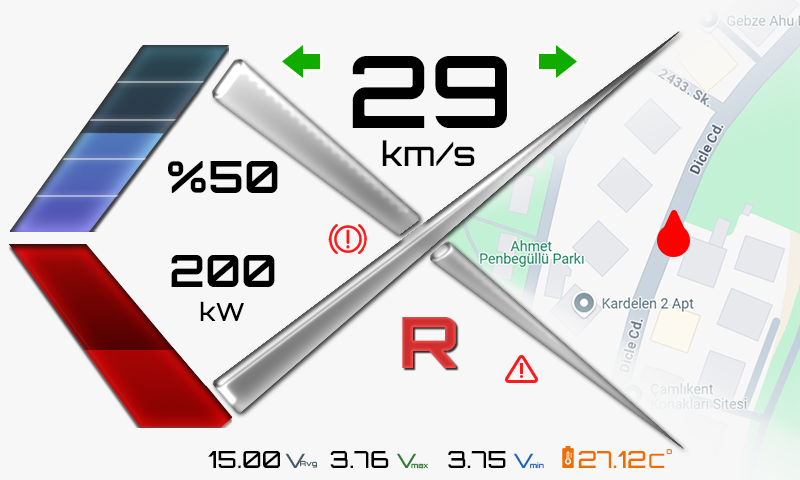
<style>
.page{position:relative;width:800px;height:480px;background:#f7f7f7}
.page>*{position:absolute;margin:0}
.t1{font:100px "Orbitron-SemiBold";color:#000000}
.t2{font:33.3px "Orbitron-Medium";color:#000000}
.t3{font:44.6px "Orbitron-Bold";color:#000000}
.t4{font:25px "Orbitron-Medium";color:#000000}
.t5{font:70.9px "Orbitron-ExtraBold";color:#d32f2f;scale:1.05 1}
.t6{font:8px "Orbitron-Medium";scale:1.05 1}
.t7{font:23.6px "Orbitron-Medium";color:#000000}
.t8{font:19.8px "Orbitron-Medium";color:#455a64;scale:1.05 1}
.t9{font:7.1px "Orbitron-Medium";color:#455a64;scale:1.05 1}
.t10{font:19.8px "Orbitron-Medium";color:#2e7d32;scale:1.05 1}
.t11{font:19.8px "Orbitron-Medium";color:#1565c0;scale:1.05 1}
.t12{font:7.1px "Orbitron-Medium";scale:1.05 1}
.t13{font:23.6px "Orbitron-Medium";color:#ef6c00}
.t14{font:19.8px "Orbitron-Medium";color:#ef6c00;scale:1.05 1}
.t15{font:7.1px "Orbitron-Medium";color:#2e7d32;scale:1.05 1}
</style>
<div class="page">
<p class="t1" style="left:352px;top:56px;width:155px;height:72px">29</p>
<p class="t2" style="left:382px;top:140px;width:93px;height:26px">km/s</p>
<p class="t3" style="left:168px;top:161px;width:110px;height:32px">%50</p>
<p class="t3" style="left:171px;top:255px;width:104px;height:32px">200</p>
<p class="t4" style="left:200px;top:301px;width:44px;height:20px">kW</p>
<p class="t5" style="left:402px;top:317px;width:54px;height:51px">R</p>
<p class="t6" style="left:666px;top:449px;width:6px;height:6px">o</p>
<p class="t7" style="left:208px;top:451px;width:72px;height:17px">15.00</p>
<p class="t8" style="left:285px;top:453px;width:20px;height:15px">V</p>
<p class="t9" style="left:300px;top:460px;width:17px;height:8px">Avg</p>
<p class="t7" style="left:330px;top:451px;width:59px;height:17px">3.76</p>
<p class="t10" style="left:396px;top:453px;width:21px;height:15px">V</p>
<p class="t7" style="left:448px;top:451px;width:58px;height:17px">3.75</p>
<p class="t11" style="left:513px;top:453px;width:21px;height:15px">V</p>
<p class="t12" style="left:530px;top:462px;width:14px;height:7px">min</p>
<p class="t13" style="left:578px;top:451px;width:68px;height:17px">27.12</p>
<p class="t14" style="left:649px;top:453px;width:16px;height:15px">C</p>
<p class="t15" style="left:411px;top:463px;width:17px;height:6px">max</p>
</div>
